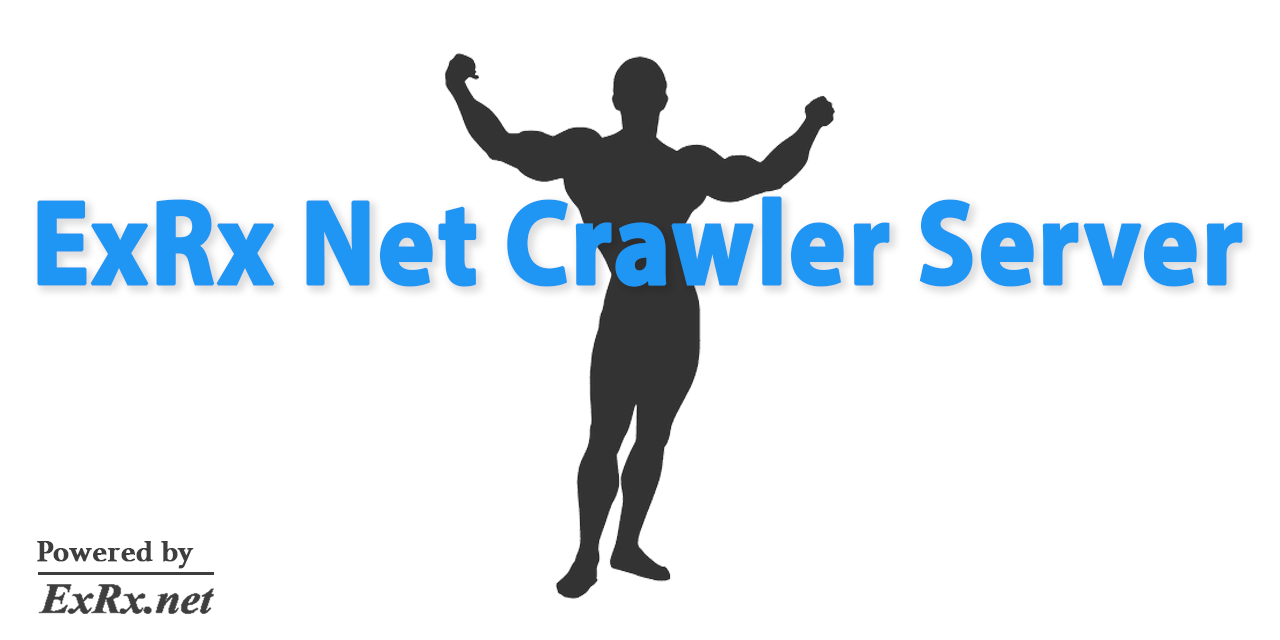
<style>
.page{position:relative;width:1280px;height:640px;background:#ffffff}
.page>*{position:absolute;margin:0}
.t1{font:121px "MyriadPro-Bold";color:#1f96f3;font-weight:bold;scale:0.89 1}
.t2{font:30px "Athelas-Bold";color:#3e3e3e;font-weight:bold}
</style>
<div class="page">
<p class="t1" style="left:37px;top:196px;width:1206px;height:91px">ExRx Net Crawler Server</p>
<p class="t2" style="left:37px;top:541px;width:157px;height:28px">Powered by</p>
</div>
